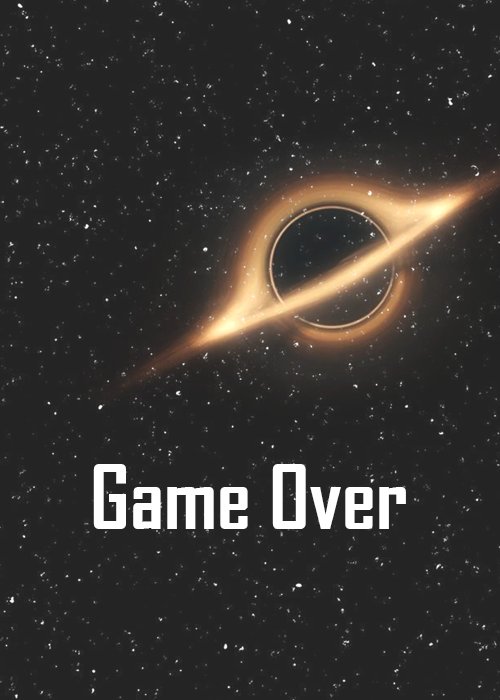
<style>
.page{position:relative;width:500px;height:700px;background:#242424}
.page>*{position:absolute;margin:0}
.t1{font:85px "AgencyFB-Bold";color:#ffffff}
</style>
<div class="page">
<p class="t1" style="left:93px;top:464px;width:313px;height:65px">Game Over</p>
</div>
